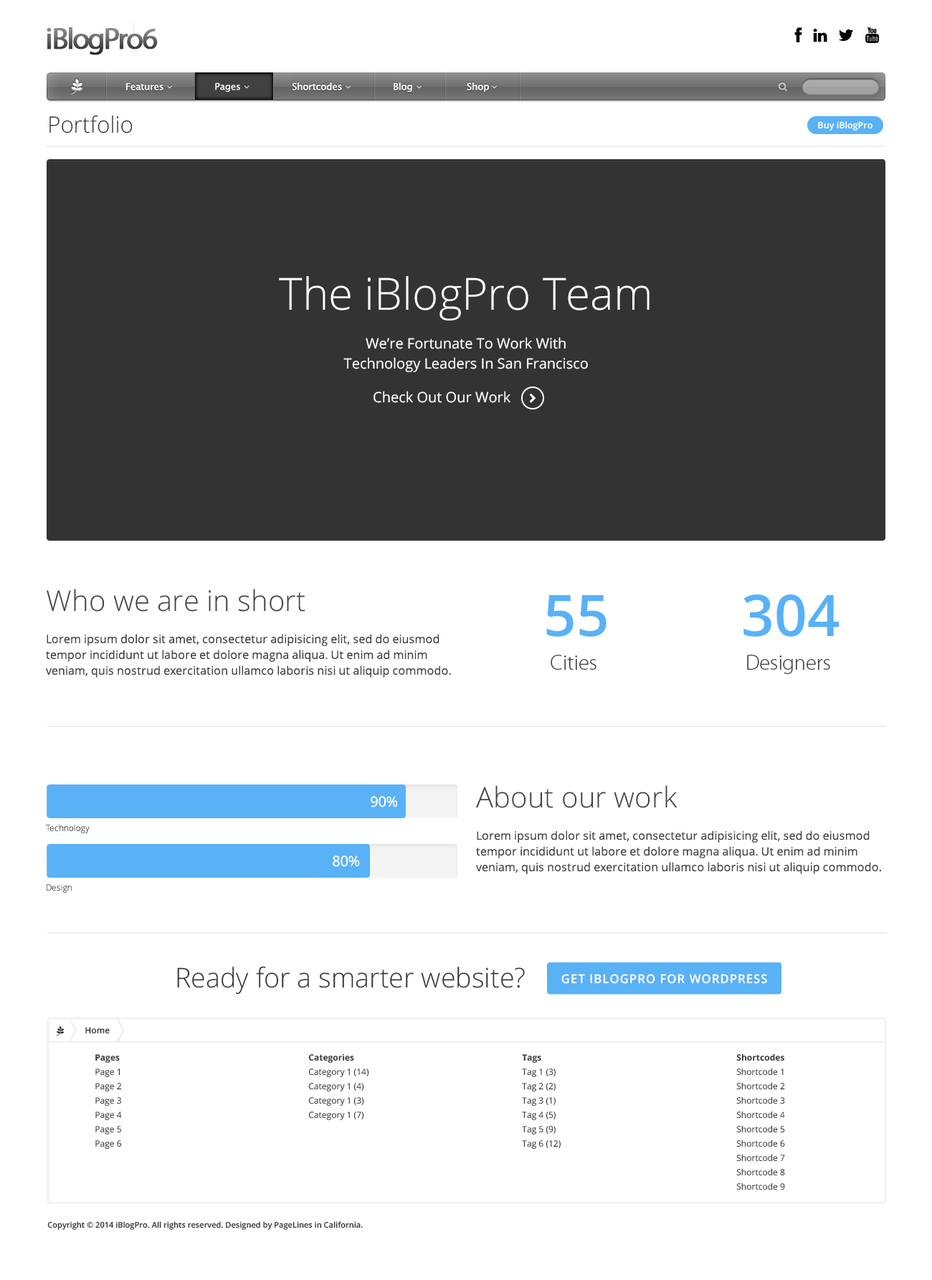
<style>
.page{position:relative;width:932px;height:1280px;background:#ffffff}
.page>*{position:absolute;margin:0}
.t1{font:30.1px "MyriadPro-Regular";letter-spacing:-0.065em;font-weight:bold}
.t2{font:9.3px "LucidaSansUnicode";color:#ffffff}
.t3{font:22.5px "OpenSans-Light";color:#333333}
.t4{font:9px "OpenSans-Semibold";color:#ffffff}
.t5{font:44.4px "OpenSans-Light";color:#ffffff}
.t6{font:14.3px/20.1px "OpenSans";color:#ffffff}
.t7{font:14.3px "OpenSans";color:#ffffff}
.t8{font:28.6px "OpenSans-Light";color:#414141}
.t9{font:57.3px "OpenSans-Semibold";color:#59b1f6}
.t10{font:11.5px/15.8px "OpenSans";color:#414141}
.t11{font:21.5px "MyriadPro-Light";color:#414141}
.t12{font:8.6px "OpenSans-Light";color:#333333}
.t13{font:11.4px/15.7px "OpenSans";color:#414141}
.t14{font:8.6px "OpenSans-Light";color:#474747}
.t15{font:27.3px "OpenSans-Light";color:#333333}
.t16{font:12.1px "OpenSans-Semibold";letter-spacing:0.06em;color:#ffffff;text-transform:uppercase}
.t17{font:8.6px "OpenSans-Semibold";color:#333333}
.t18{font:8.6px/14.3px "OpenSans";color:#333333}
.t19{font:8.6px/14.3px "OpenSans-Bold";color:#333333}
.t20{font:7.9px "OpenSans-Semibold";color:#333333}
</style>
<div class="page">
<p class="t1" style="left:47px;top:27px;width:111px;height:28px">iBlogPro6</p>
<p class="t2" style="left:126px;top:82px;width:363px;height:10px">Features         Pages         Shortcodes                Blog             Shop</p>
<p class="t2" style="left:126px;top:82px;width:363px;height:10px">Features         Pages         Shortcodes                Blog             Shop</p>
<p class="t2" style="left:215px;top:82px;width:25px;height:10px">Pages</p>
<p class="t3" style="left:49px;top:115px;width:84px;height:18px">Portfolio</p>
<p class="t4" style="left:818px;top:121px;width:54px;height:10px">Buy iBlogPro</p>
<p class="t5" style="left:279px;top:276px;width:370px;height:44px">The iBlogPro Team</p>
<p class="t6" style="left:343px;top:337px;width:245px;height:35px;text-align:center">We’re Fortunate To Work With <br>Technology Leaders In San Francisco</p>
<p class="t7" style="left:373px;top:391px;width:137px;height:12px">Check Out Our Work</p>
<p class="t8" style="left:47px;top:589px;width:258px;height:22px">Who we are in short</p>
<p class="t9" style="left:546px;top:595px;width:60px;height:42px">55</p>
<p class="t9" style="left:743px;top:594px;width:96px;height:43px">304</p>
<p class="t10" style="left:45px;top:634px;width:406px;height:43px">Lorem ipsum dolor sit amet, consectetur adipisicing elit, sed do eiusmod tempor incididunt ut labore et dolore magna aliqua. Ut enim ad minim veniam, quis nostrud exercitation ullamco laboris nisi ut aliquip commodo.</p>
<p class="t11" style="left:551px;top:654px;width:45px;height:16px">Cities</p>
<p class="t11" style="left:747px;top:654px;width:83px;height:20px">Designers</p>
<p class="t8" style="left:476px;top:785px;width:201px;height:23px">About our work</p>
<p class="t7" style="left:371px;top:796px;width:26px;height:11px">90%</p>
<p class="t12" style="left:45px;top:824px;width:45px;height:9px">Technology</p>
<p class="t13" style="left:476px;top:830px;width:405px;height:44px">Lorem ipsum dolor sit amet, consectetur adipisicing elit, sed do eiusmod tempor incididunt ut labore et dolore magna aliqua. Ut enim ad minim veniam, quis nostrud exercitation ullamco laboris nisi ut aliquip commodo.</p>
<p class="t7" style="left:333px;top:855px;width:27px;height:12px">80%</p>
<p class="t14" style="left:47px;top:884px;width:25px;height:8px">Design</p>
<p class="t15" style="left:177px;top:966px;width:348px;height:28px">Ready for a smarter website?</p>
<p class="t16" style="left:561px;top:973px;width:206px;height:11px">Get iBlogPro for WordPress</p>
<p class="t17" style="left:85px;top:1027px;width:25px;height:7px">Home</p>
<p class="t18" style="left:95px;top:1054px;width:27px;height:95px"><span class="t19">Pages<br></span>Page 1<br>Page 2<br>Page 3<br>Page 4<br>Page 5<br>Page 6</p>
<p class="t18" style="left:308px;top:1054px;width:61px;height:66px"><span class="t19">Categories<br></span>Category 1 (14)<br>Category 1 (4)<br>Category 1 (3)<br>Category 1 (7)</p>
<p class="t18" style="left:522px;top:1054px;width:39px;height:95px"><span class="t19">Tags<br></span>Tag 1 (3)<br>Tag 2 (2)<br>Tag 3 (1)<br>Tag 4 (5)<br>Tag 5 (9)<br>Tag 6 (12)</p>
<p class="t18" style="left:736px;top:1053px;width:49px;height:137px"><span class="t19">Shortcodes<br></span>Shortcode 1<br>Shortcode 2<br>Shortcode 3<br>Shortcode 4<br>Shortcode 5<br>Shortcode 6<br>Shortcode 7<br>Shortcode 8<br>Shortcode 9</p>
<p class="t20" style="left:47px;top:1221px;width:316px;height:8px">Copyright © 2014 iBlogPro. All rights reserved. Designed by PageLines in California.</p>
</div>
